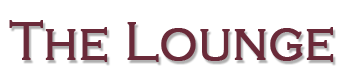
<style>
.page{position:relative;width:340px;height:80px;background:#ffffff}
.page>*{position:absolute;margin:0}
.t1{font:55.6px "CopperplateGothic-Light";color:#6a2a39;font-weight:bold;scale:0.9 1}
</style>
<div class="page">
<p class="t1" style="left:9px;top:20px;width:325px;height:42px">The Lounge</p>
</div>
